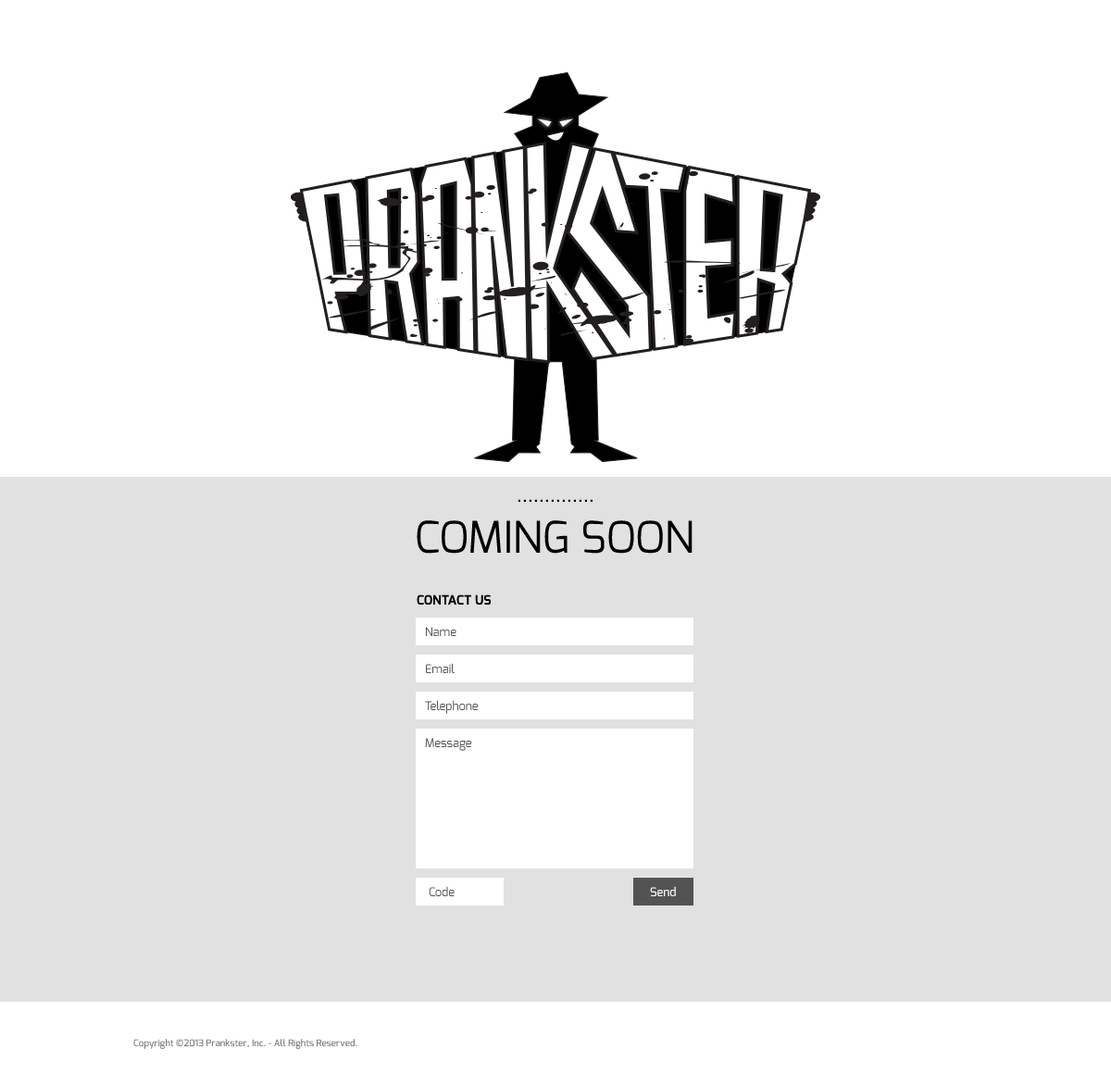
<style>
.page{position:relative;width:1111px;height:1074px;background:#ffffff}
.page>*{position:absolute;margin:0}
.t1{font:20.4px "Exo-Regular";color:#000000;text-transform:uppercase}
.t2{font:43.5px "Exo-Regular";color:#000000;text-transform:uppercase}
.t3{font:13px "Exo-Bold";color:#000000;text-transform:uppercase}
.t4{font:12px "Exo-Regular";color:#535353}
.t5{font:12px "Exo-Medium";color:#ffffff}
.t6{font:9.3px "Exo-Medium";color:#767676}
</style>
<div class="page">
<p class="t1" style="left:517px;top:499px;width:75px;height:3px">..............</p>
<p class="t2" style="left:416px;top:520px;width:276px;height:33px">Coming Soon</p>
<p class="t3" style="left:416px;top:594px;width:75px;height:10px">Contact Us</p>
<p class="t4" style="left:426px;top:627px;width:30px;height:9px">Name</p>
<p class="t4" style="left:426px;top:663px;width:28px;height:10px">Email</p>
<p class="t4" style="left:425px;top:700px;width:53px;height:14px">Telephone</p>
<p class="t4" style="left:425px;top:738px;width:46px;height:13px">Message</p>
<p class="t4" style="left:429px;top:886px;width:25px;height:10px">Code</p>
<p class="t5" style="left:650px;top:886px;width:26px;height:10px">Send</p>
<p class="t6" style="left:133px;top:1038px;width:224px;height:11px">Copyright ©2013 Prankster, Inc. - All Rights Reserved.</p>
</div>
